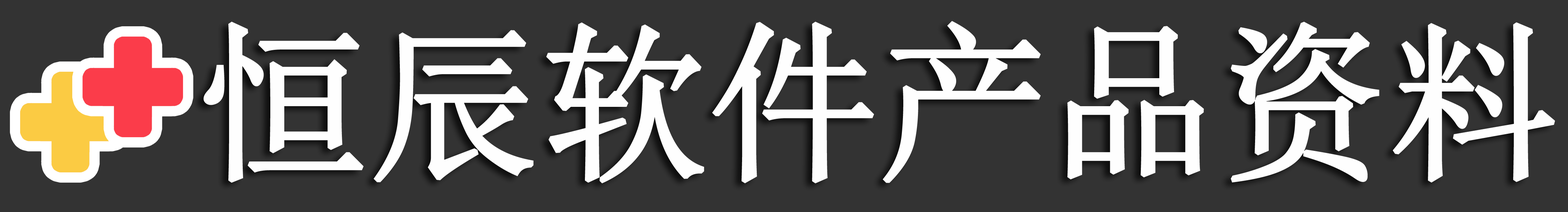
<style>
.page{position:relative;width:1568px;height:212px;background:#333333}
.page>*{position:absolute;margin:0}
.t1{font:170.5px "SimSun";letter-spacing:-0.03em;color:#fefefe;font-weight:bold}
</style>
<div class="page">
<p class="t1" style="left:203px;top:21px;width:1352px;height:162px">恒辰软件产品资料</p>
</div>
